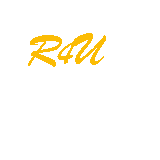
<style>
.page{position:relative;width:160px;height:160px;background:#ffffff}
.page>*{position:absolute;margin:0}
.t1{font:48px "BrushScriptMT";letter-spacing:0.005em;color:#fbbc05}
.t2{font:36px "BrushScriptMT";letter-spacing:0.005em;color:#fbbc05}
</style>
<div class="page">
<p class="t1" style="left:28px;top:33px;width:78px;height:34px">R<span class="t2">4</span>U</p>
</div>
